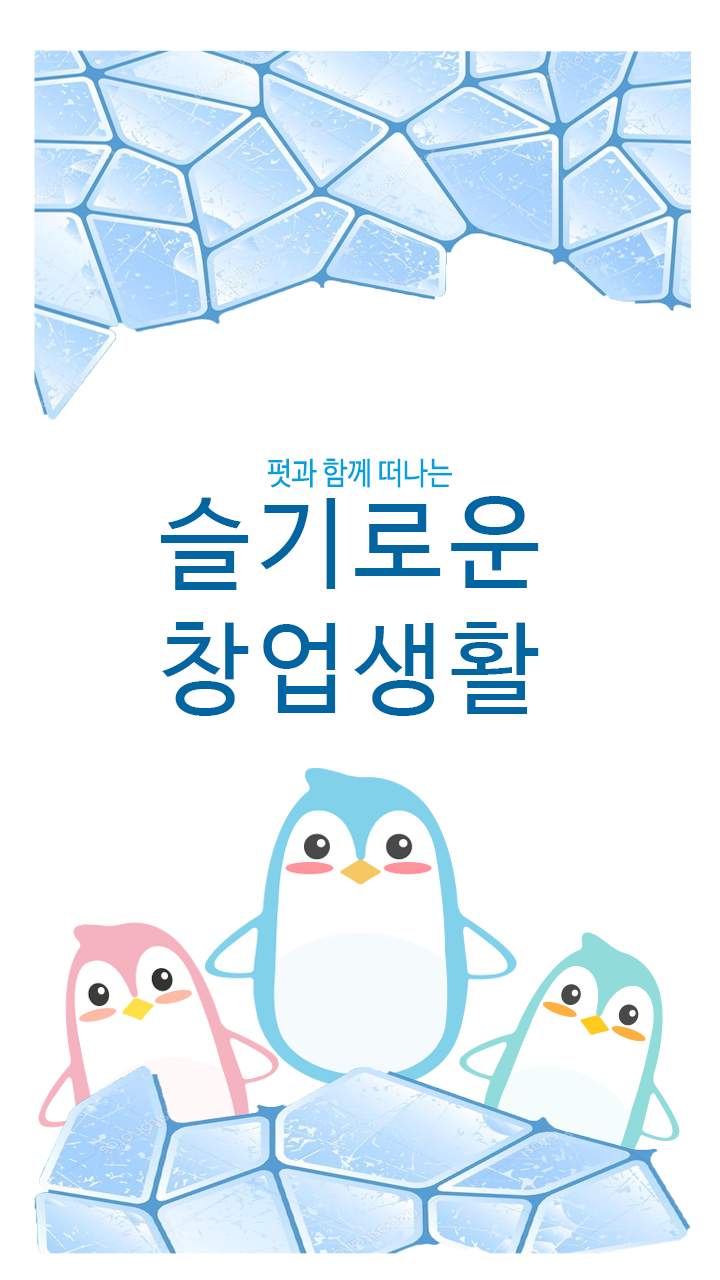
<style>
.page{position:relative;width:720px;height:1280px;background:#ffffff}
.page>*{position:absolute;margin:0}
.t1{font:31.3px "NanumBarunGothic";color:#00a1e0;scale:0.88 1}
.t2{font:100px/125px "NanumBarunGothic";letter-spacing:0.075em;color:#0065a1}
</style>
<div class="page">
<p class="t1" style="left:267px;top:458px;width:185px;height:30px">펏과 함께 떠나는</p>
<p class="t2" style="left:161px;top:496px;width:378px;height:220px;text-align:center">슬기로운 <br>창업생활</p>
</div>
